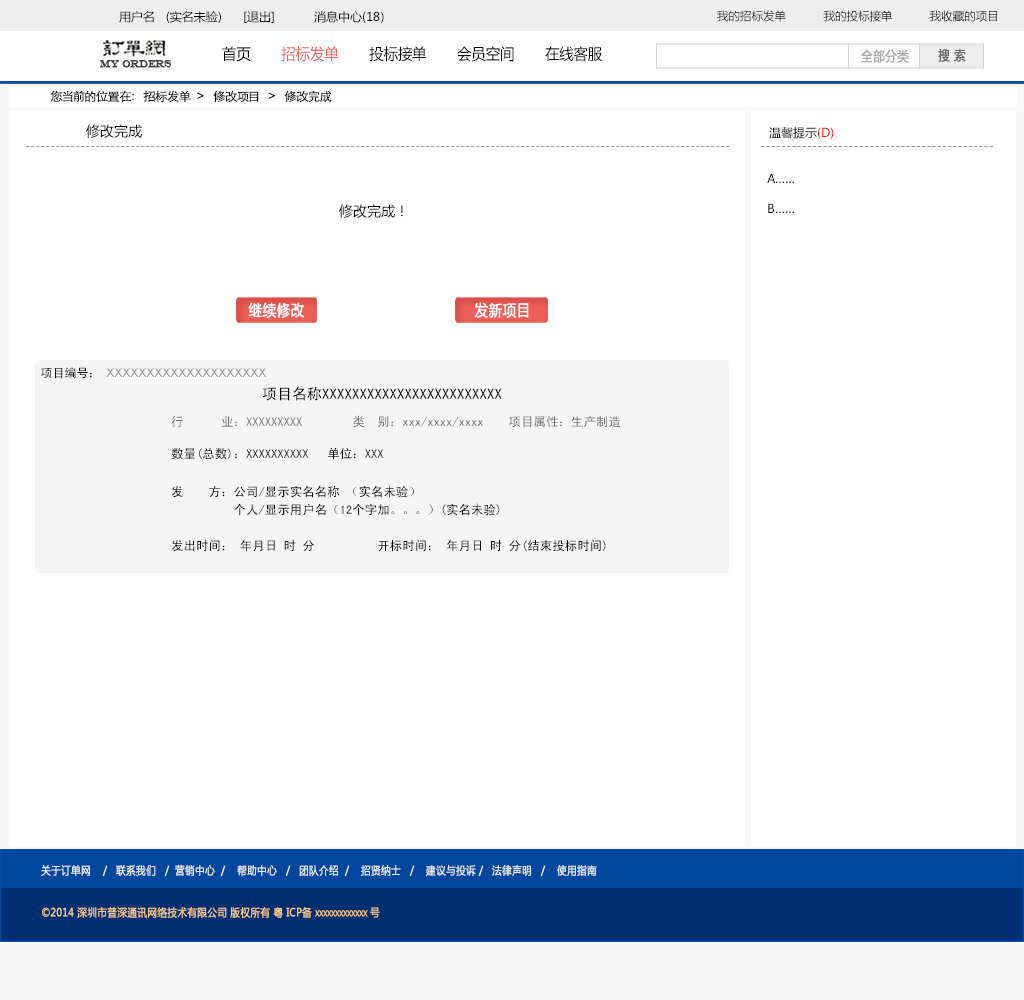
<style>
.page{position:relative;width:1024px;height:1000px;background:#ffffff}
.page>*{position:absolute;margin:0}
.t1{font:12px "MicrosoftYaHei";color:#000000}
.t2{font:11.5px "MicrosoftYaHei";color:#000000}
.t3{font:15.4px "MicrosoftYaHei";color:#000000;font-variant:small-caps;scale:0.94 1}
.t4{font:15.4px "MicrosoftYaHei";color:#ed6059;font-variant:small-caps;scale:0.94 1}
.t5{font:13.2px "MicrosoftYaHei";color:#aaaaaa;font-variant:small-caps;font-weight:bold;scale:0.86 1}
.t6{font:13.2px "MicrosoftYaHei";color:#626262;font-variant:small-caps;font-weight:bold;scale:0.86 1}
.t7{font:9.9px "EngraversMT";color:#434343;font-variant:small-caps;font-weight:bold;scale:0.86 1}
.t8{font:12px "STXihei";color:#060606;scale:1.04 1}
.t9{font:14px "MicrosoftYaHei";color:#000000}
.t10{font:12px "MicrosoftYaHei";color:#ff0000}
.t11{font:12px "MicrosoftYaHei";color:#a0a0a0}
.t12{font:12px "MicrosoftYaHei";color:#959595}
.t13{font:12px/30px "MicrosoftYaHei";color:#000000}
.t14{font:15.4px "MicrosoftYaHei";color:#ffffff;font-variant:small-caps;font-weight:bold;scale:0.86 1}
.t15{font:12px "ArialMT";color:#898989}
.t16{font:15px "SimHei";color:#000000}
.t17{font:12px "SimHei";color:#000000}
.t18{font:12.5px "SimHei";color:#000000}
.t19{font:12.5px "SimHei";color:#707070}
.t20{font:12.5px/18px "SimHei";color:#000000}
.t21{font:11px "MicrosoftYaHei";color:#eeeeee;font-variant:small-caps;font-weight:bold;scale:0.86 1}
.t22{font:15.4px "STXihei";color:#eeeeee;font-variant:small-caps;font-weight:bold;scale:0.86 1}
.t23{font:11px "MicrosoftYaHei";color:#facd89;font-variant:small-caps;font-weight:bold;scale:0.87 1}
.t24{font:11px "MicrosoftYaHei";color:#eeeeee;font-variant:small-caps;font-weight:bold;scale:0.87 1}
</style>
<div class="page">
<p class="t1" style="left:119px;top:11px;width:265px;height:12px">用户名   (实名未验)      [退出]           消息中心(18)</p>
<p class="t2" style="left:717px;top:10px;width:280px;height:12px">我的招标发单           我的投标接单           我收藏的项目</p>
<p class="t3" style="left:222px;top:46px;width:381px;height:16px">首页       <span class="t4">招标发单  </span>     投标接单       会员空间       在线客服</p>
<p class="t5" style="left:861px;top:49px;width:48px;height:14px">全部分类</p>
<p class="t6" style="left:938px;top:48px;width:28px;height:14px">搜 索</p>
<p class="t7" style="left:100px;top:60px;width:72px;height:8px">MY ORDERS</p>
<p class="t8" style="left:50px;top:90px;width:282px;height:12px">您当前的位置在：  招标发单  &gt;   修改项目   &gt;   修改完成</p>
<p class="t9" style="left:86px;top:124px;width:56px;height:14px">修改完成</p>
<p class="t1" style="left:769px;top:127px;width:65px;height:12px">温馨提示<span class="t10">(D)</span></p>
<p class="t11" style="left:26px;top:146px;width:704px;height:1px">---------------------------------------------------------------------------------------------------------------------------------------------</p>
<p class="t12" style="left:761px;top:146px;width:232px;height:1px">---------------------------------------------</p>
<p class="t13" style="left:767px;top:173px;width:27px;height:40px">A……<br>B……</p>
<p class="t9" style="left:339px;top:204px;width:64px;height:14px">修改完成！</p>
<p class="t14" style="left:248px;top:302px;width:57px;height:16px">继续修改</p>
<p class="t14" style="left:474px;top:302px;width:55px;height:16px">发新项目</p>
<p class="t15" style="left:41px;top:367px;width:226px;height:12px"><span class="t16"> </span><span class="t17">项目编号： </span>XXXXXXXXXXXXXXXXXXXX</p>
<p class="t16" style="left:262px;top:386px;width:240px;height:15px"><span class="t18"><br></span>项目名称XXXXXXXXXXXXXXXXXXXXXXXX</p>
<p class="t19" style="left:171px;top:415px;width:450px;height:13px">行      业：XXXXXXXXX        类  别：xxx/xxxx/xxxx    项目属性：生产制造</p>
<p class="t18" style="left:171px;top:447px;width:213px;height:13px">数量(总数)：XXXXXXXXXX   单位：XXX</p>
<p class="t20" style="left:172px;top:485px;width:434px;height:67px">发    方：公司/显示实名名称 （实名未验）<br>          个人/显示用户名（12个字加。。。）(实名未验)<br><br>发出时间： 年月日 时 分          开标时间： 年月日 时 分(结束投标时间)</p>
<p class="t21" style="left:41px;top:864px;width:556px;height:12px"><span class="t22"><br><br></span>关于订单网    /   联系我们   /  营销中心  /    帮助中心   /   团队介绍  /    招贤纳士   /    建议与投诉 /   法律声明   /    使用指南</p>
<p class="t23" style="left:42px;top:907px;width:338px;height:11px"><span class="t24"> </span>©2014 深圳市普深通讯网络技术有限公司 版权所有 粤 ICP备 xxxxxxxxxxxxx 号</p>
</div>
